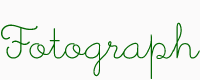
<style>
.page{position:relative;width:200px;height:80px;background:#fbfafa}
.page>*{position:absolute;margin:0}
.t1{font:50px "LittleDaysAlt";color:#046802}
</style>
<div class="page">
<p class="t1" style="left:1px;top:22px;width:199px;height:57px">Fotograph</p>
</div>
